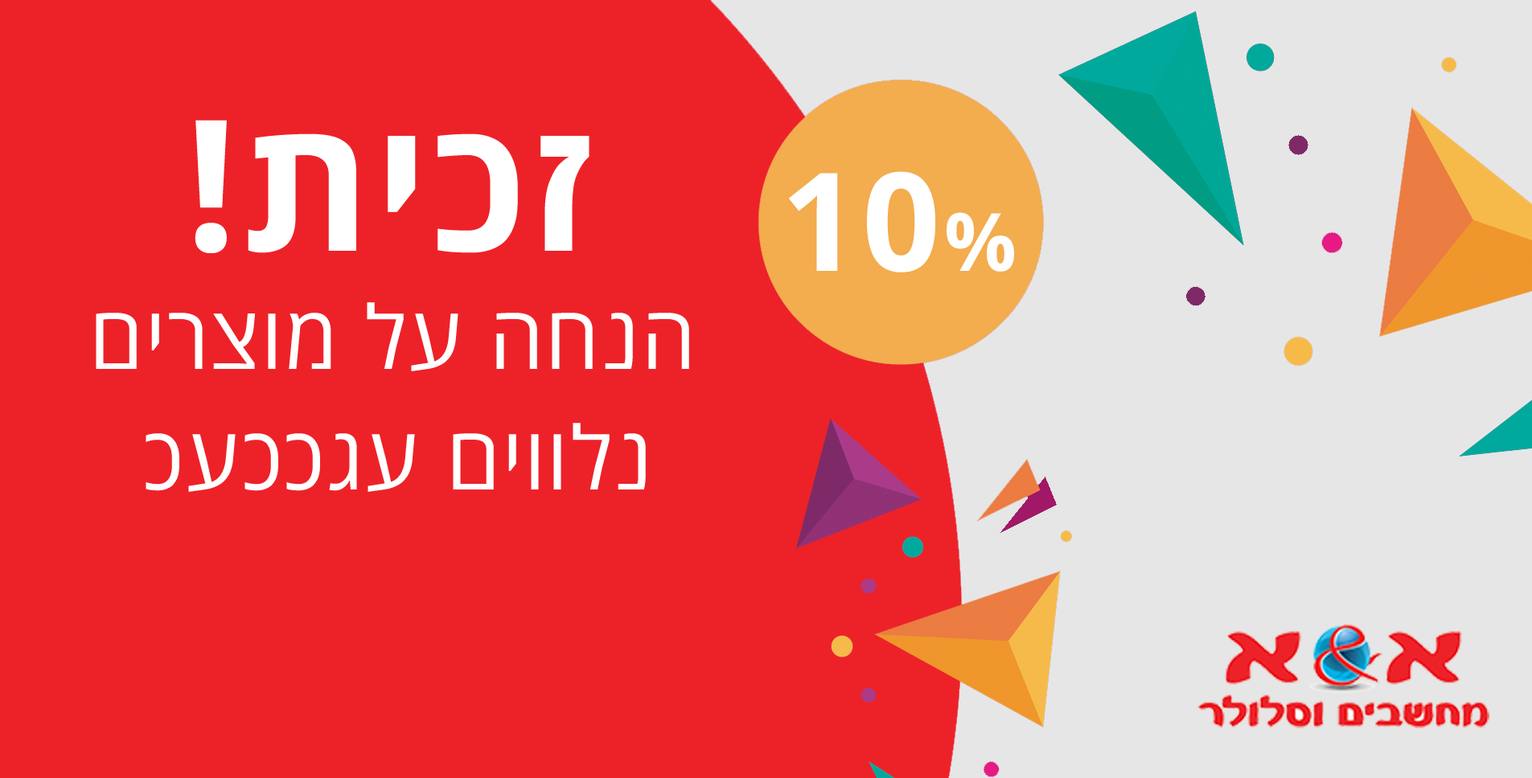
<style>
.page{position:relative;width:1532px;height:778px;background:#ed2228}
.page>*{position:absolute;margin:0}
.t1{font:182.9px "OpenSansHebrew-Bold";letter-spacing:0.025em;color:#ffffff}
.t2{font:136.7px "OpenSansHebrew-Bold";letter-spacing:0.025em;color:#ffffff}
.t3{font:80.4px "OpenSansHebrew-Bold";letter-spacing:0.025em;color:#ffffff}
.t4{font:87.8px "OpenSansHebrew-Regular";letter-spacing:0.025em;color:#ffffff}
</style>
<div class="page">
<p class="t1" style="left:195px;top:120px;width:394px;height:133px">!תיכז</p>
<p class="t2" style="left:789px;top:171px;width:225px;height:102px">10<span class="t3">%</span></p>
<p class="t4" style="left:96px;top:302px;width:593px;height:70px">םירצומ לע החנה</p>
<p class="t4" style="left:146px;top:423px;width:500px;height:69px">כעככגע םיוולנ</p>
</div>
